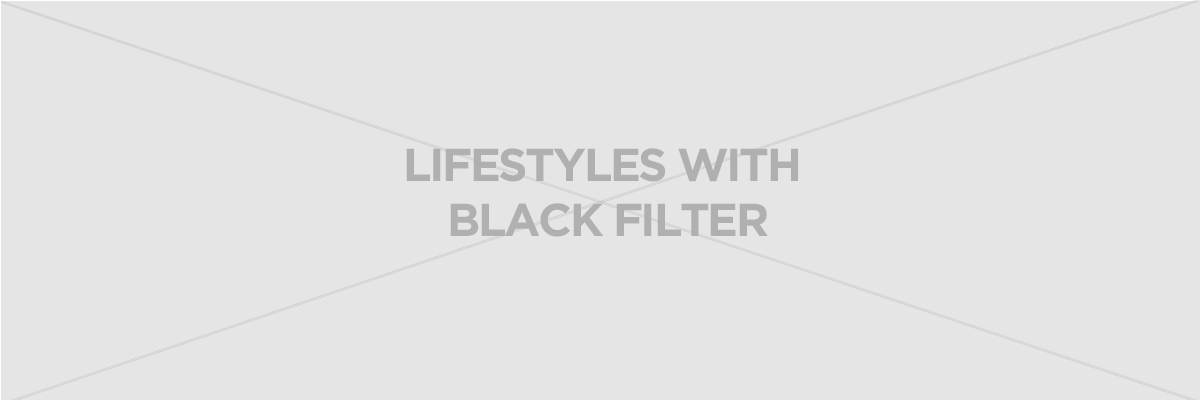
<style>
.page{position:relative;width:1200px;height:400px;background:#e5e5e5}
.page>*{position:absolute;margin:0}
.t1{font:46px "GothamBold";letter-spacing:-0.05em;color:#b1b0b0}
</style>
<div class="page">
<p class="t1" style="left:406px;top:148px;width:392px;height:89px;text-align:center">LIFESTYLES WITH <br>BLACK FILTER</p>
</div>
